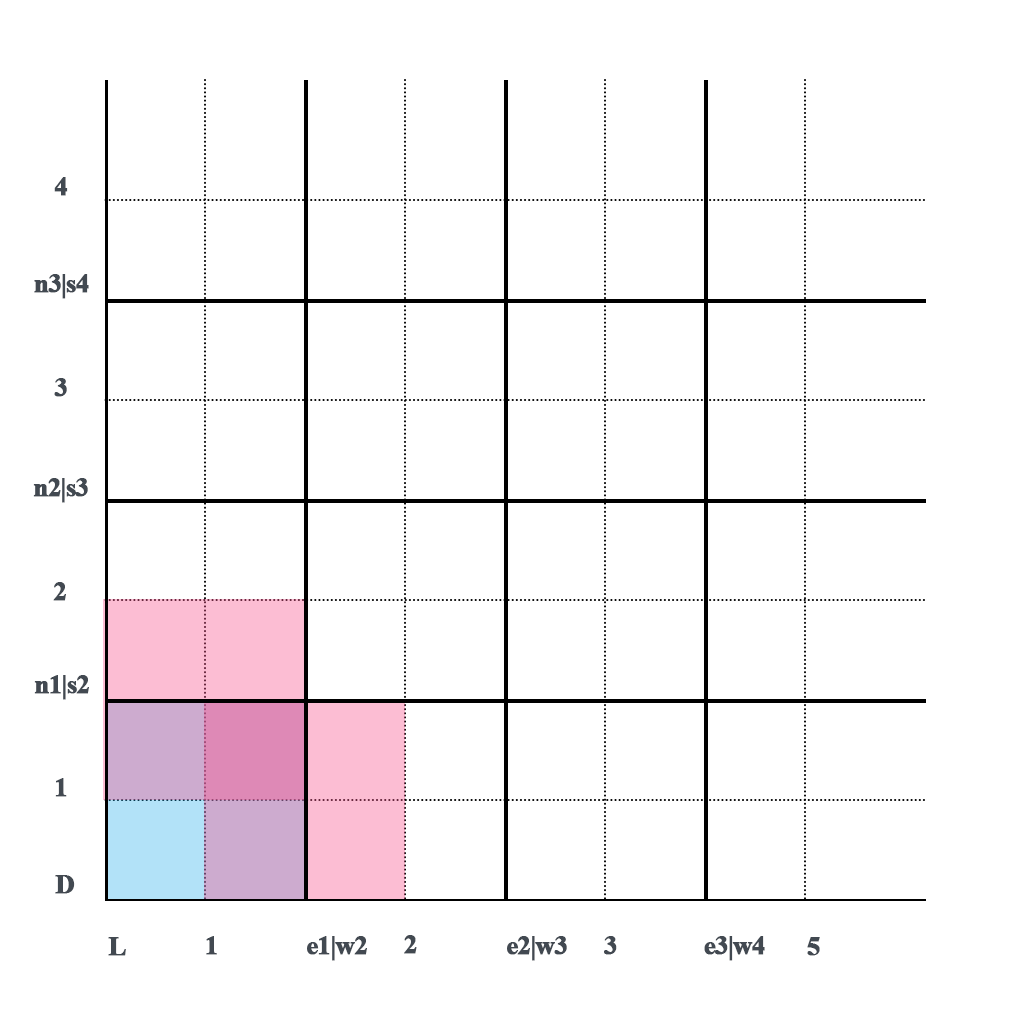
<style>
.page{position:relative;width:1024px;height:1024px;background:#ffffff}
.page>*{position:absolute;margin:0}
.t1{font:27px "TimesNewRomanPS-BoldMT";letter-spacing:-0.055em;color:#424951;font-weight:bold}
</style>
<div class="page">
<p class="t1" style="left:54px;top:177px;width:14px;height:19px">4</p>
<p class="t1" style="left:34px;top:274px;width:55px;height:25px">n3|s4</p>
<p class="t1" style="left:54px;top:378px;width:13px;height:19px">3</p>
<p class="t1" style="left:33px;top:478px;width:55px;height:25px">n2|s3</p>
<p class="t1" style="left:53px;top:582px;width:13px;height:19px">2</p>
<p class="t1" style="left:34px;top:675px;width:55px;height:25px">n1|s2</p>
<p class="t1" style="left:55px;top:778px;width:12px;height:19px">1</p>
<p class="t1" style="left:55px;top:875px;width:20px;height:19px">D</p>
<p class="t1" style="left:108px;top:937px;width:18px;height:19px">L</p>
<p class="t1" style="left:206px;top:936px;width:11px;height:19px">1</p>
<p class="t1" style="left:307px;top:936px;width:60px;height:25px">e1|w2</p>
<p class="t1" style="left:404px;top:935px;width:13px;height:19px">2</p>
<p class="t1" style="left:507px;top:936px;width:60px;height:25px">e2|w3</p>
<p class="t1" style="left:604px;top:936px;width:13px;height:19px">3</p>
<p class="t1" style="left:704px;top:936px;width:61px;height:25px">e3|w4</p>
<p class="t1" style="left:807px;top:937px;width:13px;height:19px">5</p>
</div>
